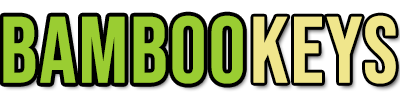
<style>
.page{position:relative;width:400px;height:100px;background:#ffffff}
.page>*{position:absolute;margin:0}
.t1{font:93.3px "BebasNeue-Regular";color:#9acd32;font-weight:bold}
.t2{font:93.3px "BebasNeue-Regular";color:#f0e68c;font-weight:bold}
</style>
<div class="page">
<p class="t1" style="left:3px;top:15px;width:240px;height:69px">BAMBOO</p>
<p class="t2" style="left:253px;top:15px;width:143px;height:69px">KEYS</p>
</div>
